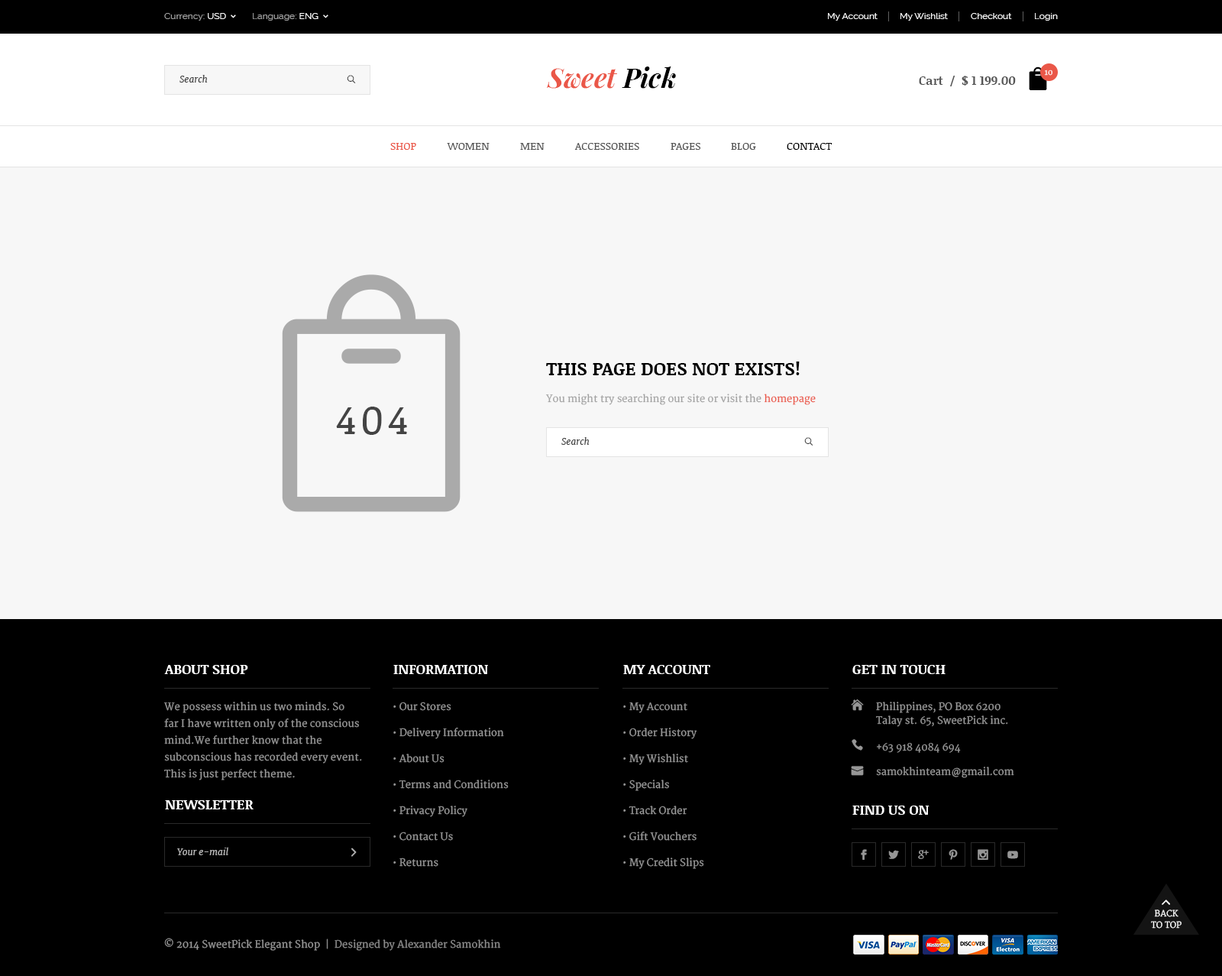
<style>
.page{position:relative;width:1222px;height:976px;background:#f7f7f7}
.page>*{position:absolute;margin:0}
.t1{font:9.2px "Raleway";color:#a1a1a1}
.t2{font:9.2px "Raleway";color:#ffffff}
.t3{font:26.7px "PlayfairDisplay-BoldItalic";color:#ea5748}
.t4{font:26.7px "PlayfairDisplay-BoldItalic";color:#000000}
.t5{font:9.2px "Merriweather-Italic";color:#424242}
.t6{font:12.2px "NoticiaText-Bold";color:#555555}
.t7{font:7.6px "Merriweather";color:#ffffff}
.t8{font:10.7px "NoticiaText-Regular";color:#ea5748}
.t9{font:10.7px "NoticiaText-Regular";color:#555555}
.t10{font:10.7px "NoticiaText-Regular";color:#000000}
.t11{font:18.3px "NoticiaText-Bold";color:#000000;text-transform:uppercase}
.t12{font:9.9px "Merriweather";color:#a1a1a1}
.t13{font:9.9px "Merriweather";color:#ea5748}
.t14{font:40.5px "NoticiaText-Regular";letter-spacing:0.1em;color:#444444;text-transform:uppercase}
.t15{font:13.8px "NoticiaText-Bold";color:#ffffff}
.t16{font:9.9px/16.8px "Merriweather";color:#969696}
.t17{font:9.9px/26px "Merriweather";color:#969696}
.t18{font:9.9px/13.8px "Merriweather";color:#969696}
.t19{font:9.9px "Merriweather";color:#969696}
.t20{font:9.2px "Merriweather-Italic";color:#b2b2b2}
.t21{font:8.4px/11.5px "Merriweather";color:#ffffff}
.t22{font:9.9px "Merriweather";color:#8b8b8b}
</style>
<div class="page">
<p class="t1" style="left:164px;top:13px;width:62px;height:8px">Currency:<span class="t2"> USD</span></p>
<p class="t1" style="left:253px;top:13px;width:66px;height:8px">Language: <span class="t2">ENG</span></p>
<p class="t2" style="left:828px;top:13px;width:50px;height:8px">My Account</p>
<p class="t2" style="left:901px;top:13px;width:47px;height:8px">My Wishlist</p>
<p class="t2" style="left:971px;top:13px;width:41px;height:6px">Checkout</p>
<p class="t2" style="left:1035px;top:13px;width:23px;height:8px">Login</p>
<p class="t3" style="left:547px;top:66px;width:129px;height:23px">Sweet<span class="t4"> Pick</span></p>
<p class="t5" style="left:180px;top:75px;width:28px;height:8px">Search</p>
<p class="t6" style="left:919px;top:76px;width:97px;height:10px">Cart  /  $ 1 199.00</p>
<p class="t7" style="left:1044px;top:70px;width:9px;height:6px">10</p>
<p class="t8" style="left:390px;top:143px;width:26px;height:7px">SHOP</p>
<p class="t9" style="left:447px;top:143px;width:43px;height:7px">WOMEN</p>
<p class="t9" style="left:520px;top:143px;width:25px;height:7px">MEN</p>
<p class="t9" style="left:574px;top:143px;width:65px;height:7px">ACCESSORIES</p>
<p class="t9" style="left:671px;top:143px;width:30px;height:7px">PAGES</p>
<p class="t9" style="left:731px;top:143px;width:25px;height:7px">BLOG</p>
<p class="t10" style="left:787px;top:143px;width:45px;height:7px">CONTACT</p>
<p class="t11" style="left:546px;top:361px;width:254px;height:14px">THIS PAGE DOES NOT EXISTS!</p>
<p class="t12" style="left:545px;top:393px;width:271px;height:12px">You might try searching our site or visit the <span class="t13">homepage</span></p>
<p class="t14" style="left:336px;top:406px;width:71px;height:29px">404</p>
<p class="t5" style="left:561px;top:437px;width:29px;height:8px">Search</p>
<p class="t15" style="left:164px;top:665px;width:84px;height:9px">ABOUT SHOP</p>
<p class="t15" style="left:393px;top:665px;width:95px;height:9px">INFORMATION</p>
<p class="t15" style="left:623px;top:665px;width:87px;height:9px">MY ACCOUNT</p>
<p class="t15" style="left:853px;top:665px;width:93px;height:9px">GET IN TOUCH</p>
<p class="t16" style="left:163px;top:701px;width:199px;height:79px">We possess within us two minds. So far I have written only of the conscious mind.We further know that the subconscious has recorded every event. This is just perfect theme.</p>
<p class="t17" style="left:393px;top:701px;width:116px;height:165px">• Our Stores<br>• Delivery Information<br>• About Us<br>• Terms and Conditions<br>• Privacy Policy<br>• Contact Us<br>• Returns</p>
<p class="t18" style="left:876px;top:701px;width:132px;height:26px">Philippines, PO Box 6200<br>Talay st. 65, SweetPick inc.</p>
<p class="t17" style="left:623px;top:702px;width:81px;height:167px">• My Account<br>• Order History<br>• My Wishlist<br>• Specials<br>• Track Order<br>• Gift Vouchers<br>• My Credit Slips</p>
<p class="t19" style="left:877px;top:743px;width:84px;height:9px">+63 918 4084 694</p>
<p class="t19" style="left:876px;top:766px;width:139px;height:12px">samokhinteam@gmail.com</p>
<p class="t15" style="left:165px;top:800px;width:89px;height:9px">NEWSLETTER</p>
<p class="t15" style="left:853px;top:805px;width:77px;height:9px">FIND US ON</p>
<p class="t20" style="left:177px;top:846px;width:51px;height:9px">Your e-mail</p>
<p class="t21" style="left:1151px;top:909px;width:31px;height:19px;text-align:center">BACK<br>TO TOP</p>
<p class="t22" style="left:164px;top:937px;width:337px;height:13px"><span class="t19">© 2014 SweetPick Elegant Shop  </span>|  Designed by Alexander Samokhin</p>
</div>
